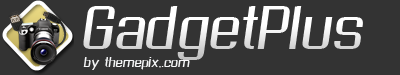
<style>
.page{position:relative;width:400px;height:75px;background:#333333}
.page>*{position:absolute;margin:0}
.t1{font:48px "AsseenonTVSkew";color:#f4f4f4}
.t2{font:11px "AsseenonTVSkew";color:#f6f7f8}
</style>
<div class="page">
<p class="t1" style="left:83px;top:6px;width:280px;height:54px">GadgetPlus</p>
<p class="t2" style="left:83px;top:57px;width:107px;height:13px">by themepix,.com</p>
</div>
